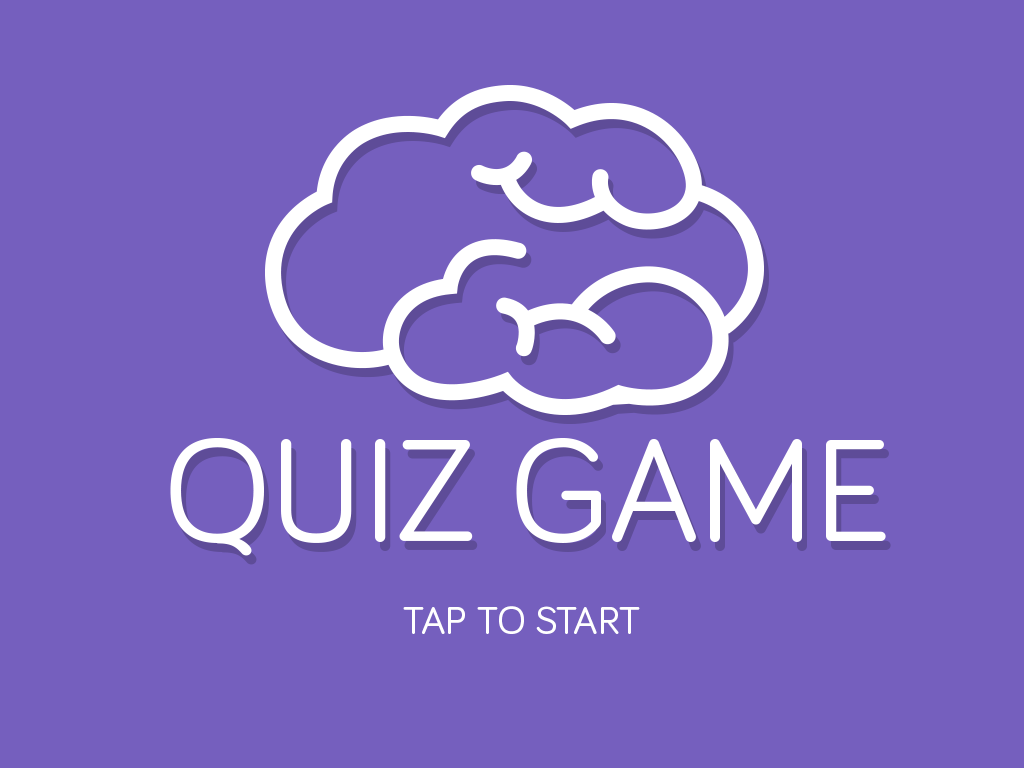
<style>
.page{position:relative;width:1024px;height:768px;background:#755fbe}
.page>*{position:absolute;margin:0}
.t1{font:150px "Bariol-Regular";color:#ffffff}
.t2{font:40px "Bariol-Regular";color:#ffffff}
</style>
<div class="page">
<p class="t1" style="left:170px;top:438px;width:716px;height:118px">QUIZ GAME</p>
<p class="t2" style="left:403px;top:606px;width:237px;height:28px">TAP TO START</p>
</div>
